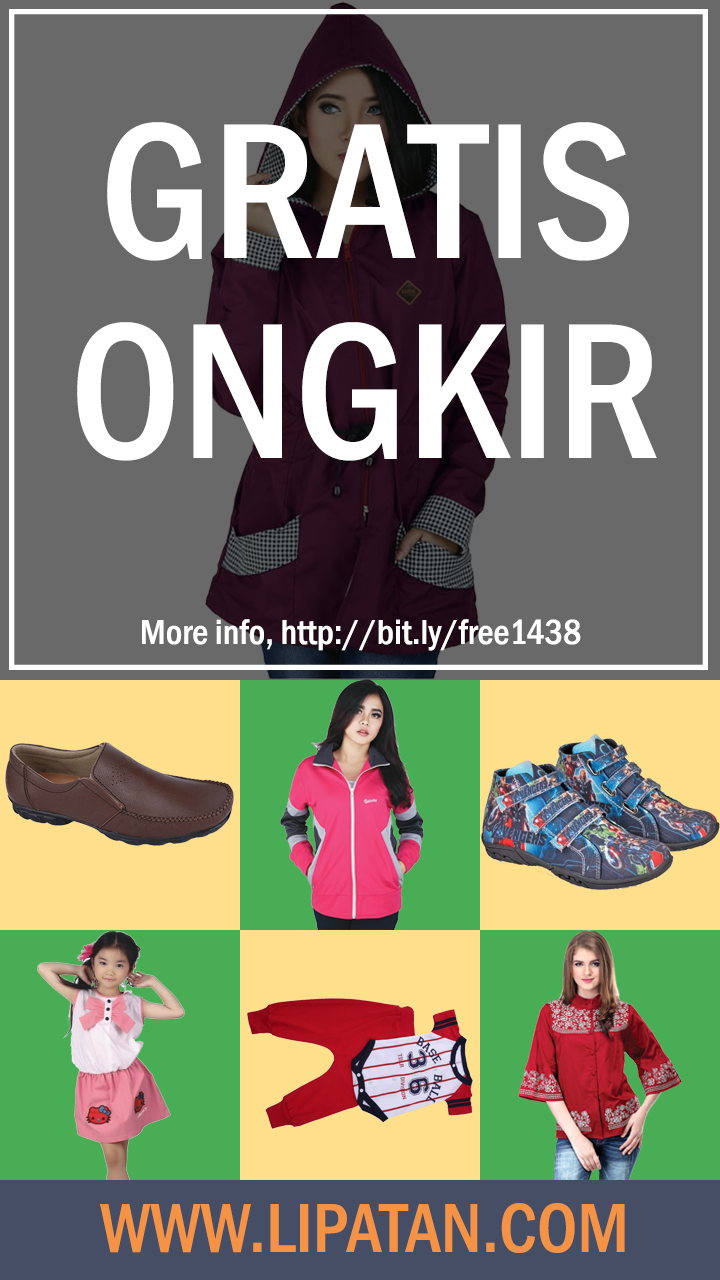
<style>
.page{position:relative;width:720px;height:1280px;background:#696969}
.page>*{position:absolute;margin:0}
.t1{font:200px "FranklinGothic-MediumCond";color:#ffffff}
.t2{font:36px "FranklinGothic-MediumCond";color:#ffffff}
.t3{font:72px "FranklinGothic-MediumCond";color:#f49346}
</style>
<div class="page">
<p class="t1" style="left:107px;top:122px;width:522px;height:139px">GRATIS</p>
<p class="t1" style="left:77px;top:322px;width:580px;height:139px">ONGKIR</p>
<p class="t2" style="left:142px;top:619px;width:439px;height:32px">More info, http://bit.ly/free1438</p>
<p class="t3" style="left:100px;top:1203px;width:525px;height:50px">WWW.LIPATAN.COM</p>
</div>
